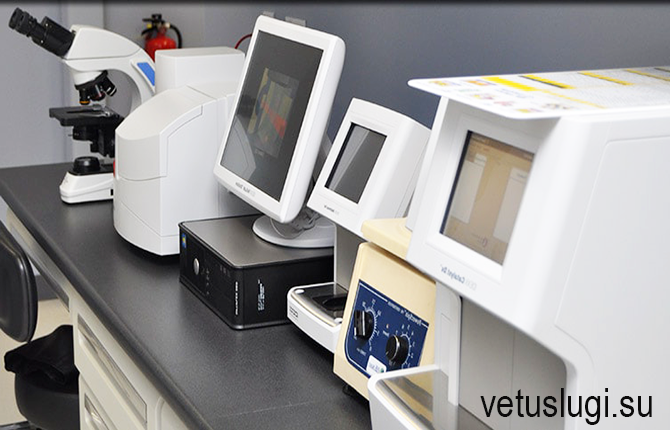
<style>
.page{position:relative;width:670px;height:430px}
.page>*{position:absolute;margin:0}
.t1{font:40px "ArialNarrow";letter-spacing:0.002em;color:#0b0a0a}
</style>
<div class="page">
<p class="t1" style="left:480px;top:388px;width:172px;height:37px">vetuslugi.su</p>
</div>
